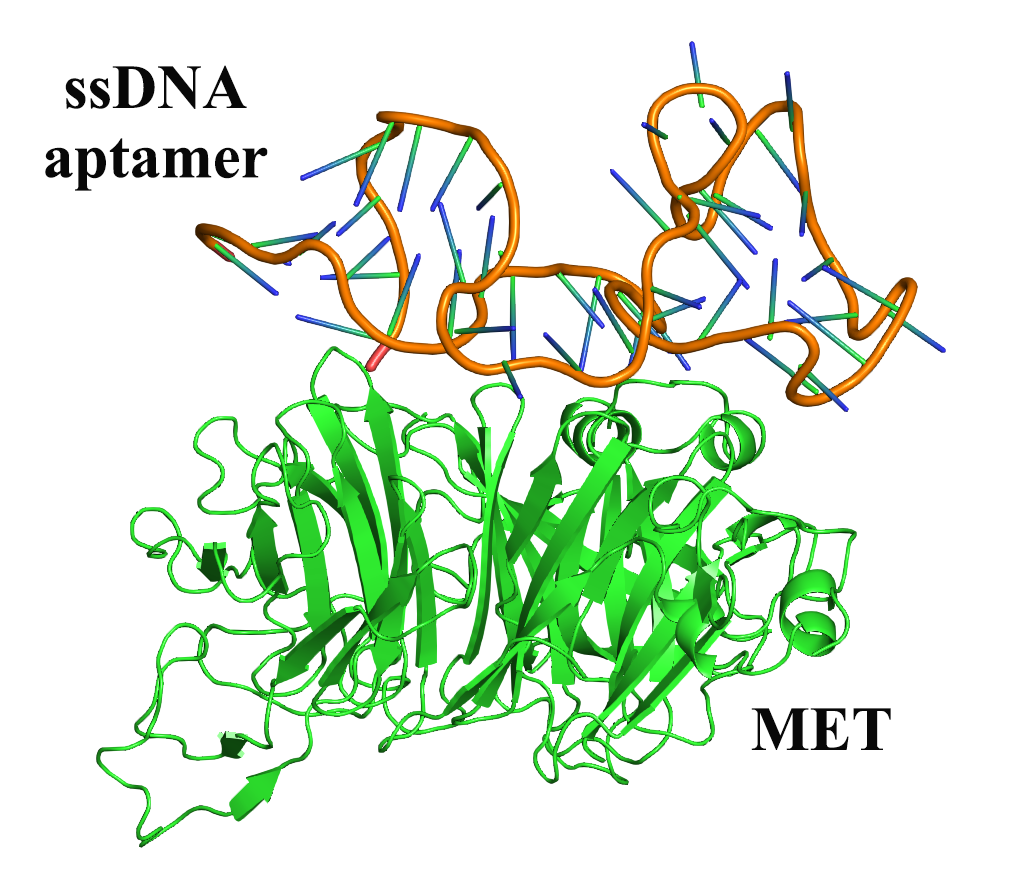
<style>
.page{position:relative;width:1009px;height:873px;background:#ffffff}
.page>*{position:absolute;margin:0}
.t1{font:62.5px/69.4px "TimesNewRomanPS-BoldMT";color:#080808}
.t2{font:62.5px "TimesNewRomanPS-BoldMT";color:#080808}
</style>
<div class="page">
<p class="t1" style="left:45px;top:65px;width:223px;height:126px;text-align:center">ssDNA<br>aptamer</p>
<p class="t2" style="left:751px;top:708px;width:140px;height:42px">MET</p>
</div>
